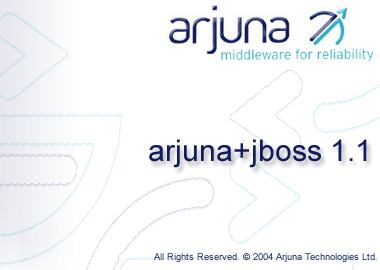
<style>
.page{position:relative;width:380px;height:270px;background:#ffffff}
.page>*{position:absolute;margin:0}
.t1{font:30px "ArialMT";color:#101c5f}
.t2{font:9.5px "ArialMT";color:#142062}
</style>
<div class="page">
<p class="t1" style="left:149px;top:139px;width:218px;height:29px">arjuna+jboss 1.1</p>
<p class="t2" style="left:154px;top:253px;width:223px;height:9px">All Rights Reserved. © 2004 Arjuna Technologies Ltd.</p>
</div>
